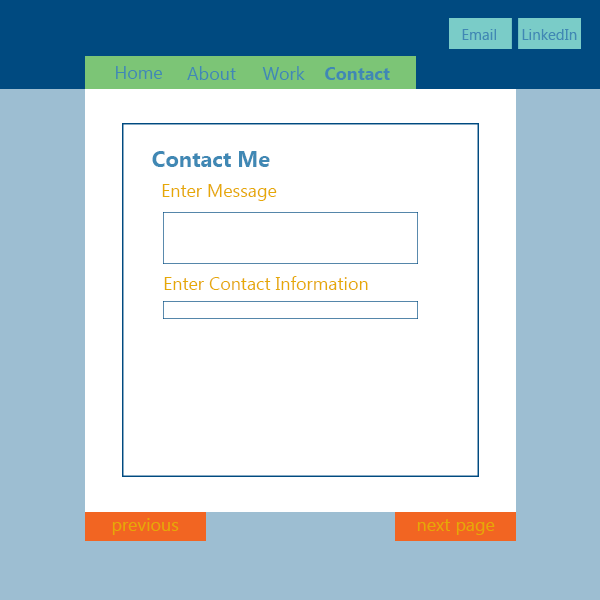
<style>
.page{position:relative;width:600px;height:600px;background:#ffffff}
.page>*{position:absolute;margin:0}
.t1{font:15.1px "Gadugi";color:#4088b4}
.t2{font:18px "Gadugi";color:#4088b4}
.t3{font:18px "Gadugi-Bold";color:#4088b4}
.t4{font:21.8px "Gadugi-Bold";color:#4088b4}
.t5{font:18px "Gadugi";color:#e6a906}
</style>
<div class="page">
<p class="t1" style="left:462px;top:29px;width:34px;height:11px">Email</p>
<p class="t1" style="left:522px;top:29px;width:55px;height:11px">LinkedIn</p>
<p class="t2" style="left:116px;top:66px;width:46px;height:13px">Home</p>
<p class="t2" style="left:187px;top:66px;width:49px;height:14px">About</p>
<p class="t2" style="left:262px;top:66px;width:43px;height:14px">Work</p>
<p class="t3" style="left:325px;top:67px;width:65px;height:13px">Contact</p>
<p class="t4" style="left:152px;top:151px;width:118px;height:16px">Contact Me</p>
<p class="t5" style="left:162px;top:184px;width:115px;height:17px">Enter Message</p>
<p class="t5" style="left:164px;top:276px;width:204px;height:14px">Enter Contact Information</p>
<p class="t5" style="left:112px;top:518px;width:67px;height:17px">previous</p>
<p class="t5" style="left:417px;top:519px;width:78px;height:16px">next page</p>
</div>
